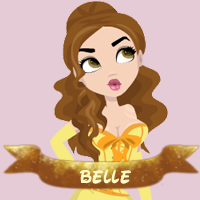
<style>
.page{position:relative;width:200px;height:200px;background:#e4cbd6}
.page>*{position:absolute;margin:0}
.t1{font:37.4px "Waltograph";color:#fcfac7}
</style>
<div class="page">
<p class="t1" style="left:79px;top:169px;width:53px;height:15px">belle</p>
</div>
